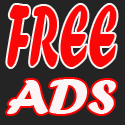
<style>
.page{position:relative;width:125px;height:125px;background:#242424}
.page>*{position:absolute;margin:0}
.t1{font:91.9px "ForteMT";color:#fa0808;scale:0.51 1}
.t2{font:50.2px "ForteMT";color:#fbf5f5;scale:1.15 1}
</style>
<div class="page">
<p class="t1" style="left:7px;top:5px;width:110px;height:62px">FREE</p>
<p class="t2" style="left:7px;top:79px;width:109px;height:35px">ADS</p>
</div>
